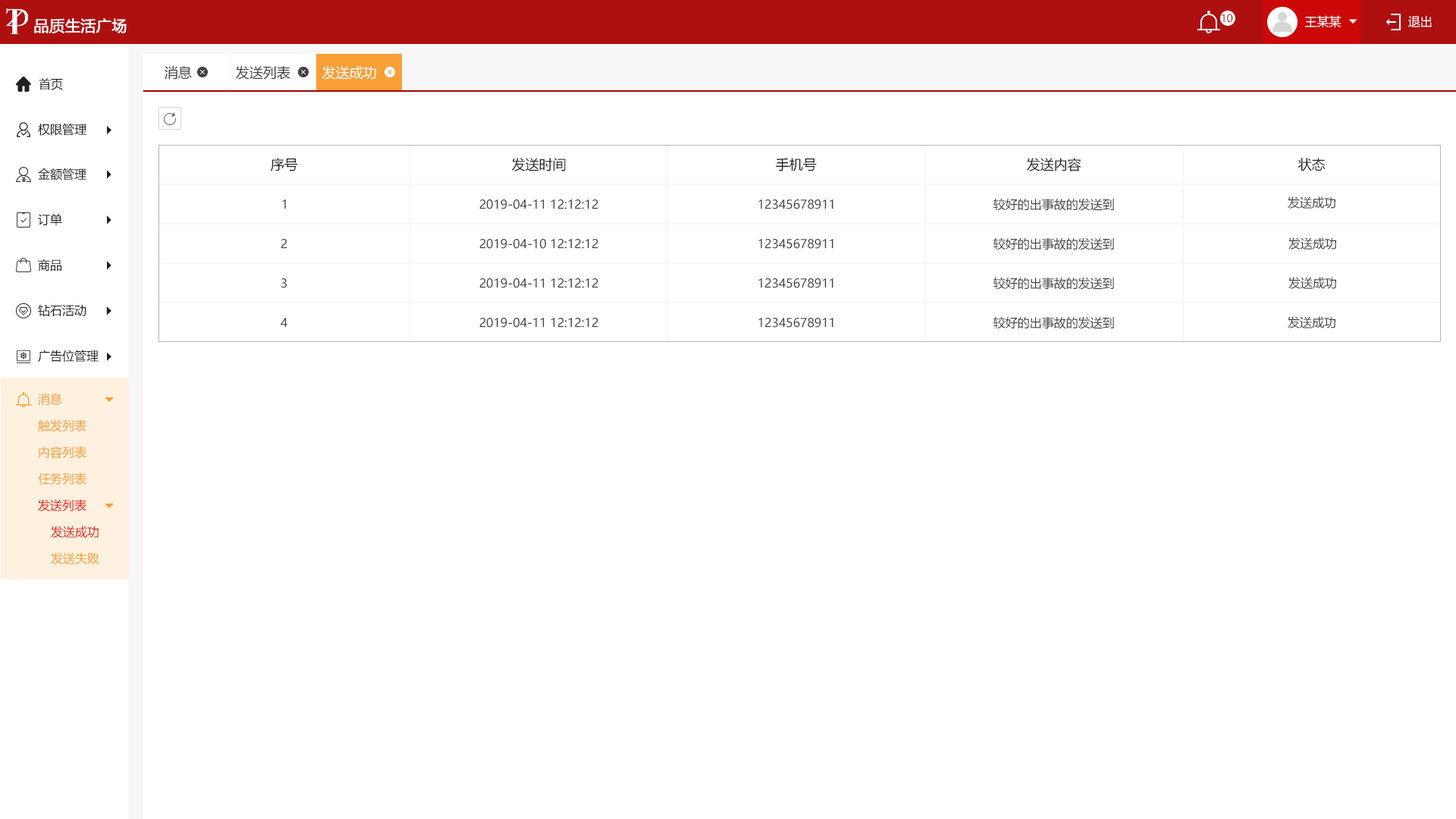
<style>
.page{position:relative;width:1456px;height:819px;background:#ffffff}
.page>*{position:absolute;margin:0}
.t1{font:10.6px "MicrosoftYaHei";color:#9c0606;text-transform:uppercase}
.t2{font:12.1px "MicrosoftYaHei";color:#ffffff;text-transform:uppercase}
.t3{font:15.2px "MicrosoftYaHei";color:#ffffff;text-transform:uppercase;font-weight:bold}
.t4{font:13.6px "MicrosoftYaHei";color:#404040;text-transform:uppercase}
.t5{font:13.6px "MicrosoftYaHei";color:#ffffff;text-transform:uppercase}
.t6{font:12.1px "MicrosoftYaHei";color:#202020;text-transform:uppercase}
.t7{font:13.6px "MicrosoftYaHei";color:#202020;text-transform:uppercase}
.t8{font:12.1px "MicrosoftYaHei";color:#404040;text-transform:uppercase}
.t9{font:12.1px "MicrosoftYaHei";color:#f99f36;text-transform:uppercase}
.t10{font:12.1px "MicrosoftYaHei";color:#e61f18;text-transform:uppercase}
</style>
<div class="page">
<p class="t1" style="left:1222px;top:14px;width:11px;height:9px">10</p>
<p class="t2" style="left:1305px;top:15px;width:36px;height:13px">王某某</p>
<p class="t2" style="left:1408px;top:16px;width:24px;height:11px">退出</p>
<p class="t3" style="left:34px;top:18px;width:93px;height:15px">品质生活广场</p>
<p class="t4" style="left:165px;top:66px;width:27px;height:14px">消息</p>
<p class="t4" style="left:236px;top:66px;width:54px;height:14px">发送列表</p>
<p class="t5" style="left:322px;top:66px;width:54px;height:14px">发送成功</p>
<p class="t6" style="left:39px;top:78px;width:24px;height:12px">首页</p>
<p class="t6" style="left:38px;top:123px;width:48px;height:13px">权限管理</p>
<p class="t7" style="left:270px;top:158px;width:28px;height:13px">序号</p>
<p class="t7" style="left:512px;top:158px;width:54px;height:13px">发送时间</p>
<p class="t7" style="left:776px;top:158px;width:41px;height:13px">手机号</p>
<p class="t7" style="left:1027px;top:158px;width:54px;height:13px">发送内容</p>
<p class="t7" style="left:1297px;top:158px;width:29px;height:13px">状态</p>
<p class="t6" style="left:38px;top:168px;width:48px;height:12px">金额管理</p>
<p class="t8" style="left:993px;top:198px;width:121px;height:13px">较好的出事故的发送到</p>
<p class="t8" style="left:1288px;top:196px;width:47px;height:13px">发送成功</p>
<p class="t8" style="left:282px;top:199px;width:4px;height:10px">1</p>
<p class="t8" style="left:479px;top:199px;width:119px;height:10px">2019-04-11 12:12:12</p>
<p class="t8" style="left:758px;top:199px;width:75px;height:10px">12345678911</p>
<p class="t6" style="left:38px;top:213px;width:24px;height:13px">订单</p>
<p class="t8" style="left:281px;top:239px;width:6px;height:10px">2</p>
<p class="t8" style="left:479px;top:239px;width:119px;height:10px">2019-04-10 12:12:12</p>
<p class="t8" style="left:758px;top:239px;width:75px;height:10px">12345678911</p>
<p class="t8" style="left:993px;top:237px;width:121px;height:13px">较好的出事故的发送到</p>
<p class="t8" style="left:1288px;top:237px;width:48px;height:12px">发送成功</p>
<p class="t6" style="left:38px;top:259px;width:23px;height:12px">商品</p>
<p class="t8" style="left:281px;top:278px;width:6px;height:10px">3</p>
<p class="t8" style="left:479px;top:278px;width:119px;height:10px">2019-04-11 12:12:12</p>
<p class="t8" style="left:758px;top:278px;width:75px;height:10px">12345678911</p>
<p class="t8" style="left:993px;top:277px;width:121px;height:13px">较好的出事故的发送到</p>
<p class="t8" style="left:1288px;top:277px;width:48px;height:12px">发送成功</p>
<p class="t6" style="left:38px;top:304px;width:48px;height:12px">钻石活动</p>
<p class="t8" style="left:281px;top:318px;width:6px;height:10px">4</p>
<p class="t8" style="left:479px;top:318px;width:119px;height:10px">2019-04-11 12:12:12</p>
<p class="t8" style="left:758px;top:318px;width:75px;height:10px">12345678911</p>
<p class="t8" style="left:993px;top:316px;width:121px;height:13px">较好的出事故的发送到</p>
<p class="t8" style="left:1288px;top:316px;width:47px;height:12px">发送成功</p>
<p class="t6" style="left:38px;top:350px;width:61px;height:12px">广告位管理</p>
<p class="t9" style="left:38px;top:393px;width:24px;height:12px">消息</p>
<p class="t9" style="left:38px;top:419px;width:48px;height:12px">触发列表</p>
<p class="t9" style="left:39px;top:446px;width:47px;height:13px">内容列表</p>
<p class="t9" style="left:38px;top:472px;width:48px;height:13px">任务列表</p>
<p class="t10" style="left:38px;top:499px;width:48px;height:12px">发送列表</p>
<p class="t10" style="left:51px;top:526px;width:48px;height:12px">发送成功</p>
<p class="t9" style="left:51px;top:552px;width:48px;height:13px">发送失败</p>
</div>
